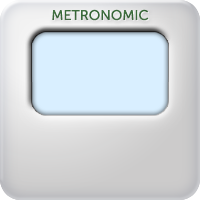
<style>
.page{position:relative;width:200px;height:200px;background:#d9efff}
.page>*{position:absolute;margin:0}
.t1{font:14px "MuseoSans-500";color:#336633;text-transform:uppercase}
</style>
<div class="page">
<p class="t1" style="left:52px;top:9px;width:97px;height:12px">Metronomic</p>
</div>
